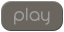
<style>
.page{position:relative;width:64px;height:32px;background:#6a665f}
.page>*{position:absolute;margin:0}
.t1{font:17.9px "OpificioNeue";color:#9f9d99}
</style>
<div class="page">
<p class="t1" style="left:14px;top:7px;width:36px;height:18px">play</p>
<p class="t1" style="left:14px;top:7px;width:36px;height:18px">play</p>
</div>
